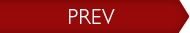
<style>
.page{position:relative;width:190px;height:33px;background:#980909}
.page>*{position:absolute;margin:0}
.t1{font:20.8px "Humanist521BT-Light";letter-spacing:0.04em;color:#ffffff}
</style>
<div class="page">
<p class="t1" style="left:69px;top:9px;width:46px;height:15px">PREV</p>
</div>
